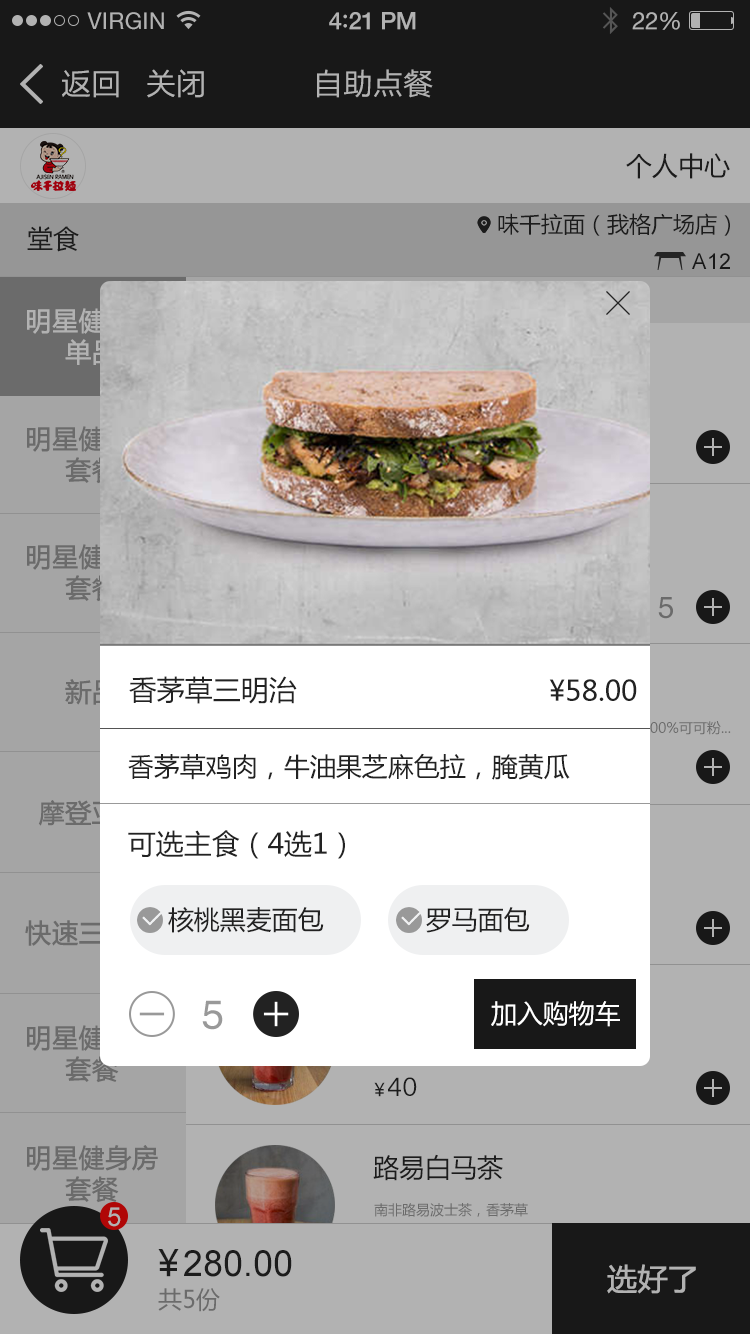
<style>
.page{position:relative;width:750px;height:1334px;background:#b2b2b2}
.page>*{position:absolute;margin:0}
.t1{font:23px "HelveticaNeue";letter-spacing:0.02em;color:#b2b2b2}
.t2{font:24px "HelveticaNeue-Medium";letter-spacing:-0.02em;color:#b2b2b2}
.t3{font:26px "Avenir-Medium";letter-spacing:-0.02em;color:#b2b2b2}
.t4{font:24px "HelveticaNeue";letter-spacing:-0.02em;color:#b2b2b2}
.t5{font:30px "FZLTHK--GBK1-0";color:#b2b2b2}
.t6{font:26px "MicrosoftYaHei";color:#282828}
.t7{font:22px "MicrosoftYaHei";color:#282828}
.t8{font:22px "ArialMT";color:#222222}
.t9{font:26px "MicrosoftYaHei";color:#b2b2b2;font-weight:bold}
.t10{font:26px "MicrosoftYaHei";font-weight:bold}
.t11{font:30px "Helvetica";letter-spacing:-0.01em;color:#6b6b6b}
.t12{font:28px "MicrosoftYaHei";color:#222222}
.t13{font:26px "MicrosoftYaHei";color:#222222}
.t14{font:40.6px "Helvetica";letter-spacing:-0.01em;color:#999999}
.t15{font:26px "MicrosoftYaHei";color:#ffffff}
.t16{font:18px "MicrosoftYaHei";letter-spacing:-0.01em;color:#282828}
.t17{font:24px "BanglaSangamMN";color:#282828}
.t18{font:26px "MicrosoftYaHei";color:#6b6b6b;font-weight:bold}
.t19{font:14px "MicrosoftYaHei";color:#6b6b6b}
.t20{font:26px "ArialMT";color:#b2b2b2}
.t21{font:36px "MicrosoftYaHei";letter-spacing:-0.01em;color:#282828}
.t22{font:36px "ArialMT";color:#282828}
.t23{font:30px "MicrosoftYaHei";letter-spacing:-0.01em;color:#b2b2b2;font-weight:bold}
.t24{font:24px "MicrosoftYaHei";color:#6b6b6b}
</style>
<div class="page">
<p class="t1" style="left:87px;top:12px;width:77px;height:18px">VIRGIN</p>
<p class="t2" style="left:329px;top:12px;width:87px;height:18px">4<span class="t3">:</span>21 PM</p>
<p class="t4" style="left:632px;top:12px;width:48px;height:18px">22%</p>
<p class="t5" style="left:62px;top:70px;width:57px;height:28px">返回</p>
<p class="t5" style="left:147px;top:69px;width:57px;height:29px">关闭</p>
<p class="t5" style="left:317px;top:69px;width:116px;height:29px">自助点餐</p>
<p class="t6" style="left:626px;top:153px;width:104px;height:26px">个人中心</p>
<p class="t7" style="left:498px;top:213px;width:232px;height:23px">味千拉面（我格广场店）</p>
<p class="t6" style="left:27px;top:226px;width:52px;height:26px">堂食</p>
<p class="t8" style="left:692px;top:253px;width:38px;height:16px">A12</p>
<p class="t9" style="left:27px;top:308px;width:131px;height:57px;text-align:center">明星健身房<br>单品</p>
<p class="t10" style="left:27px;top:426px;width:131px;height:58px;text-align:center">明星健身房<br>套餐</p>
<p class="t10" style="left:27px;top:544px;width:131px;height:58px;text-align:center">明星健身房<br>套餐</p>
<p class="t11" style="left:658px;top:597px;width:15px;height:22px">5</p>
<p class="t12" style="left:129px;top:676px;width:168px;height:28px">香茅草三明治</p>
<p class="t12" style="left:549px;top:679px;width:88px;height:22px">¥58.00</p>
<p class="t13" style="left:128px;top:753px;width:442px;height:27px">香茅草鸡肉，牛油果芝麻色拉，腌黄瓜</p>
<p class="t12" style="left:128px;top:830px;width:217px;height:29px">可选主食（4选1）</p>
<p class="t13" style="left:168px;top:907px;width:156px;height:26px">核桃黑麦面包</p>
<p class="t13" style="left:426px;top:907px;width:104px;height:26px">罗马面包</p>
<p class="t14" style="left:202px;top:1000px;width:21px;height:30px">5</p>
<p class="t15" style="left:491px;top:1001px;width:129px;height:26px">加入购物车</p>
<p class="t16" style="left:374px;top:1082px;width:11px;height:15px">￥</p>
<p class="t17" style="left:388px;top:1077px;width:29px;height:19px">40</p>
<p class="t18" style="left:27px;top:1145px;width:131px;height:58px;text-align:center">明星健身房<br>套餐</p>
<p class="t6" style="left:373px;top:1154px;width:130px;height:27px">路易白马茶</p>
<p class="t19" style="left:374px;top:1203px;width:154px;height:14px">南非路易波士茶，香茅草</p>
<p class="t20" style="left:108px;top:1207px;width:13px;height:20px">5</p>
<p class="t21" style="left:158px;top:1249px;width:21px;height:28px">￥</p>
<p class="t22" style="left:184px;top:1250px;width:108px;height:27px">280.00</p>
<p class="t23" style="left:607px;top:1264px;width:89px;height:30px">选好了</p>
<p class="t24" style="left:158px;top:1288px;width:62px;height:24px">共5份</p>
</div>
